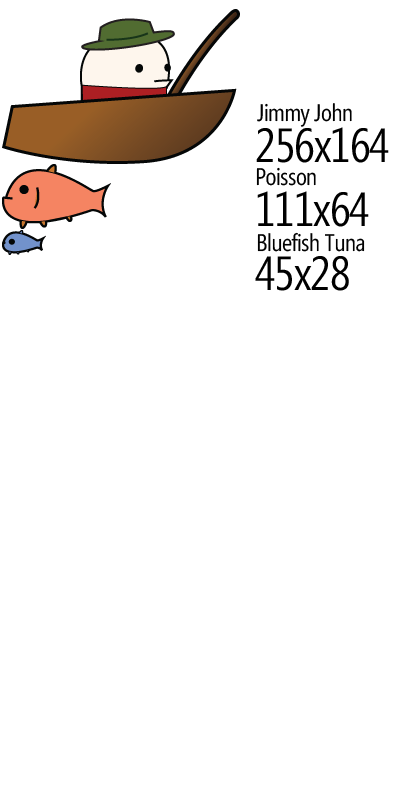
<style>
.page{position:relative;width:400px;height:800px;background:#ffffff}
.page>*{position:absolute;margin:0}
.t1{font:24px "SegoeCondensed";letter-spacing:-0.02em;color:#000000}
.t2{font:48px "SegoeCondensed";letter-spacing:-0.02em;color:#000000}
</style>
<div class="page">
<p class="t1" style="left:257px;top:103px;width:95px;height:24px">Jimmy John</p>
<p class="t2" style="left:256px;top:127px;width:133px;height:36px">256x164</p>
<p class="t1" style="left:256px;top:167px;width:60px;height:19px">Poisson</p>
<p class="t2" style="left:257px;top:191px;width:112px;height:36px">111x64</p>
<p class="t1" style="left:257px;top:232px;width:108px;height:20px">Bluefish Tuna</p>
<p class="t2" style="left:255px;top:256px;width:94px;height:35px">45x28</p>
</div>
